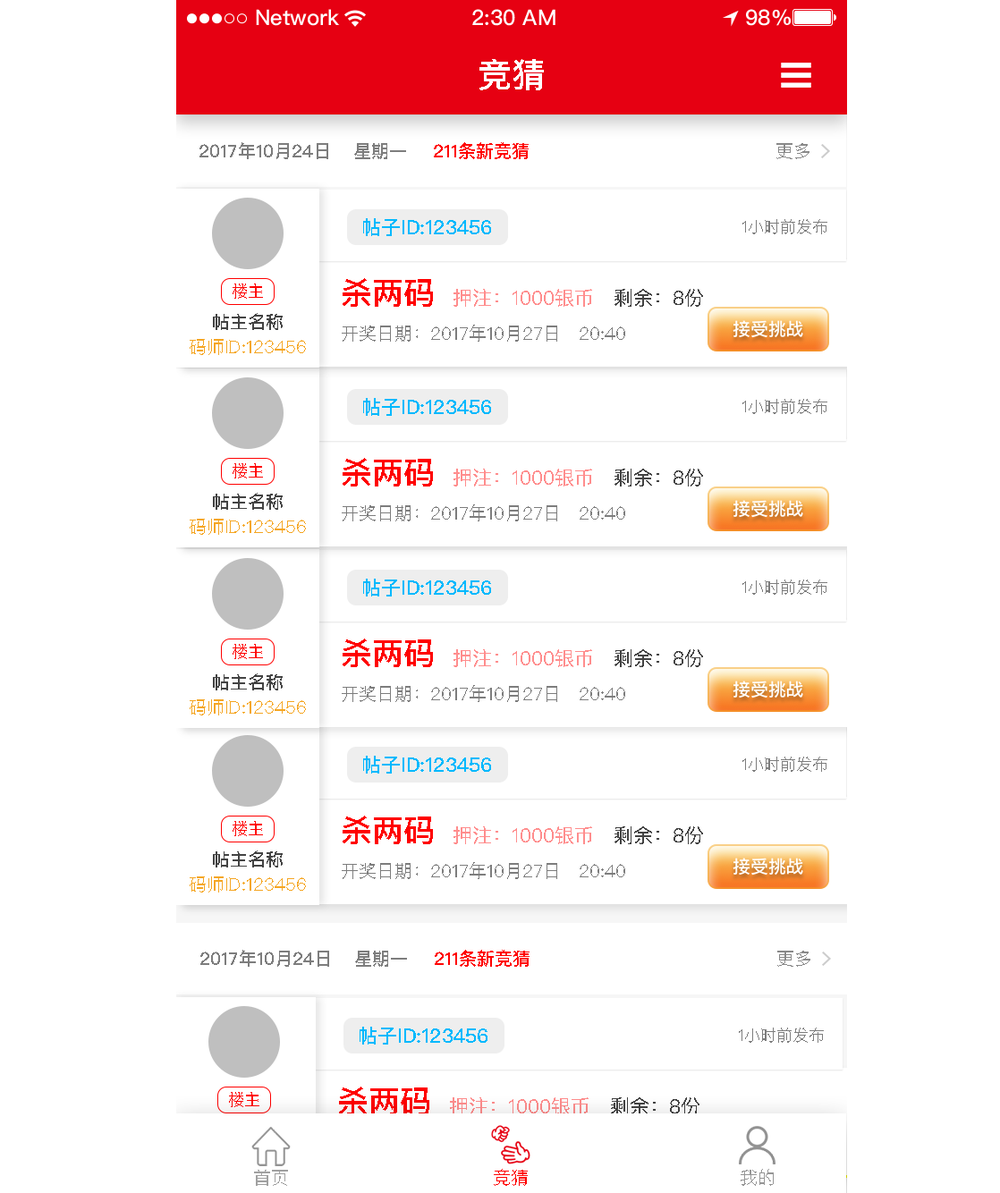
<style>
.page{position:relative;width:1000px;height:1193px;background:#ffffff}
.page>*{position:absolute;margin:0}
.t1{font:34px "PingFangSC-Medium";color:#ffffff;text-transform:uppercase}
.t2{font:17.9px "PingFangSC-Medium";color:#7d7d7d;text-transform:uppercase}
.t3{font:17.9px "PingFangSC-Medium";color:#ff0000;text-transform:uppercase}
.t4{font:17.9px "PingFangSC-Regular";color:#898989;text-transform:uppercase}
.t5{font:19.7px "PingFangSC-Medium";color:#01b9fd;text-transform:uppercase}
.t6{font:16.1px "PingFangSC-Regular";color:#7d7d7d;text-transform:uppercase}
.t7{font:31.3px "PingFangSC-Medium";color:#ff0000;text-transform:uppercase}
.t8{font:16.1px "PingFangSC-Regular";color:#ff0000;text-transform:uppercase}
.t9{font:19.7px "PingFangSC-Regular";color:#ff8d8d;text-transform:uppercase}
.t10{font:19.7px "PingFangSC-Regular";color:#434343;text-transform:uppercase}
.t11{font:17.9px "PingFangSC-Medium";color:#434343;text-transform:uppercase}
.t12{font:17.9px "PingFangSC-Regular";color:#7d7d7d;text-transform:uppercase}
.t13{font:17.9px "PingFangSC-Regular";color:#f5a623;text-transform:uppercase}
.t14{font:19.7px "PingFangSC-Regular";color:#f88989;text-transform:uppercase}
.t15{font:17.9px "PingFangSC-Regular";color:#a0a0a0;text-transform:uppercase}
.t16{font:17.9px "PingFangSC-Regular";color:#ff0000;text-transform:uppercase}
.t17{font:17.9px "PingFangSC-Regular";color:#959595;text-transform:uppercase}
</style>
<div class="page">
<p class="t1" style="left:479px;top:59px;width:65px;height:31px">竞猜</p>
<p class="t2" style="left:199px;top:142px;width:129px;height:17px">2017年10月24日</p>
<p class="t2" style="left:354px;top:143px;width:52px;height:16px">星期一</p>
<p class="t3" style="left:434px;top:142px;width:94px;height:17px">211条新竞猜</p>
<p class="t4" style="left:776px;top:143px;width:33px;height:16px">更多</p>
<p class="t5" style="left:363px;top:218px;width:128px;height:18px">帖子id:123456</p>
<p class="t6" style="left:742px;top:219px;width:85px;height:15px">1小时前发布</p>
<p class="t7" style="left:342px;top:278px;width:91px;height:29px">杀两码</p>
<p class="t8" style="left:232px;top:283px;width:31px;height:16px">楼主</p>
<p class="t9" style="left:453px;top:289px;width:139px;height:18px">押注：1000银币</p>
<p class="t10" style="left:614px;top:289px;width:89px;height:18px">剩余：8份</p>
<p class="t11" style="left:213px;top:313px;width:70px;height:17px">帖主名称</p>
<p class="t12" style="left:342px;top:325px;width:283px;height:17px">开奖日期：2017年10月27日   20:40</p>
<p class="t13" style="left:190px;top:339px;width:116px;height:16px">码师ID:123456</p>
<p class="t5" style="left:363px;top:398px;width:128px;height:18px">帖子id:123456</p>
<p class="t6" style="left:742px;top:399px;width:85px;height:15px">1小时前发布</p>
<p class="t7" style="left:342px;top:458px;width:91px;height:28px">杀两码</p>
<p class="t8" style="left:232px;top:463px;width:31px;height:15px">楼主</p>
<p class="t9" style="left:453px;top:469px;width:139px;height:17px">押注：1000银币</p>
<p class="t10" style="left:614px;top:469px;width:89px;height:17px">剩余：8份</p>
<p class="t11" style="left:213px;top:493px;width:70px;height:17px">帖主名称</p>
<p class="t12" style="left:342px;top:504px;width:283px;height:17px">开奖日期：2017年10月27日   20:40</p>
<p class="t13" style="left:190px;top:519px;width:116px;height:16px">码师ID:123456</p>
<p class="t5" style="left:363px;top:579px;width:128px;height:17px">帖子id:123456</p>
<p class="t6" style="left:742px;top:579px;width:85px;height:16px">1小时前发布</p>
<p class="t7" style="left:342px;top:638px;width:91px;height:29px">杀两码</p>
<p class="t8" style="left:232px;top:644px;width:31px;height:15px">楼主</p>
<p class="t9" style="left:453px;top:649px;width:139px;height:18px">押注：1000银币</p>
<p class="t10" style="left:614px;top:649px;width:89px;height:18px">剩余：8份</p>
<p class="t11" style="left:213px;top:673px;width:70px;height:17px">帖主名称</p>
<p class="t12" style="left:342px;top:685px;width:283px;height:17px">开奖日期：2017年10月27日   20:40</p>
<p class="t13" style="left:190px;top:699px;width:116px;height:16px">码师ID:123456</p>
<p class="t5" style="left:363px;top:756px;width:128px;height:17px">帖子id:123456</p>
<p class="t6" style="left:742px;top:756px;width:85px;height:16px">1小时前发布</p>
<p class="t8" style="left:232px;top:821px;width:31px;height:15px">楼主</p>
<p class="t7" style="left:342px;top:815px;width:91px;height:29px">杀两码</p>
<p class="t9" style="left:453px;top:826px;width:139px;height:18px">押注：1000银币</p>
<p class="t10" style="left:614px;top:826px;width:89px;height:18px">剩余：8份</p>
<p class="t11" style="left:213px;top:850px;width:70px;height:17px">帖主名称</p>
<p class="t12" style="left:342px;top:862px;width:283px;height:17px">开奖日期：2017年10月27日   20:40</p>
<p class="t13" style="left:190px;top:876px;width:116px;height:16px">码师ID:123456</p>
<p class="t2" style="left:200px;top:950px;width:129px;height:17px">2017年10月24日</p>
<p class="t2" style="left:355px;top:950px;width:52px;height:17px">星期一</p>
<p class="t3" style="left:435px;top:950px;width:94px;height:17px">211条新竞猜</p>
<p class="t4" style="left:777px;top:950px;width:33px;height:17px">更多</p>
<p class="t5" style="left:359px;top:1027px;width:128px;height:17px">帖子id:123456</p>
<p class="t6" style="left:739px;top:1027px;width:85px;height:16px">1小时前发布</p>
<p class="t8" style="left:229px;top:1092px;width:30px;height:15px">楼主</p>
<p class="t7" style="left:339px;top:1086px;width:90px;height:29px">杀两码</p>
<p class="t14" style="left:450px;top:1097px;width:138px;height:18px">押注：1000银币</p>
<p class="t10" style="left:611px;top:1097px;width:88px;height:18px">剩余：8份</p>
<p class="t15" style="left:254px;top:1170px;width:34px;height:16px">首页</p>
<p class="t16" style="left:494px;top:1169px;width:34px;height:17px">竞猜</p>
<p class="t17" style="left:740px;top:1169px;width:33px;height:17px">我的</p>
</div>
